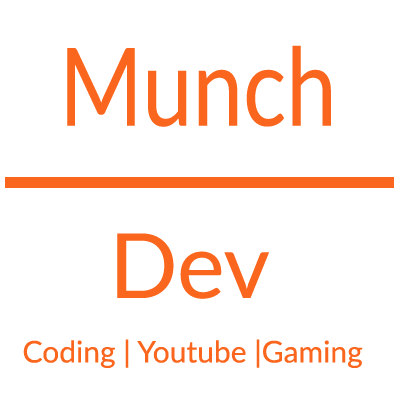
<style>
.page{position:relative;width:400px;height:400px;background:#ffffff}
.page>*{position:absolute;margin:0}
.t1{font:108.4px "Lato-Regular";color:#fa661d;scale:0.83 1}
.t2{font:90px "Lato-Regular";color:#fa661d}
.t3{font:30px "Lato-Regular";color:#fa661d}
</style>
<div class="page">
<p class="t1" style="left:67px;top:45px;width:264px;height:82px">Munch</p>
<p class="t2" style="left:117px;top:233px;width:152px;height:66px">Dev</p>
<p class="t3" style="left:23px;top:339px;width:340px;height:29px">Coding | Youtube |Gaming</p>
</div>
